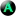
<style>
.page{position:relative;width:16px;height:16px;background:#000000}
.page>*{position:absolute;margin:0}
.t1{font:12px "KeltCapsFreehand"}
</style>
<div class="page">
<p class="t1" style="left:3px;top:2px;width:10px;height:10px">A</p>
</div>
